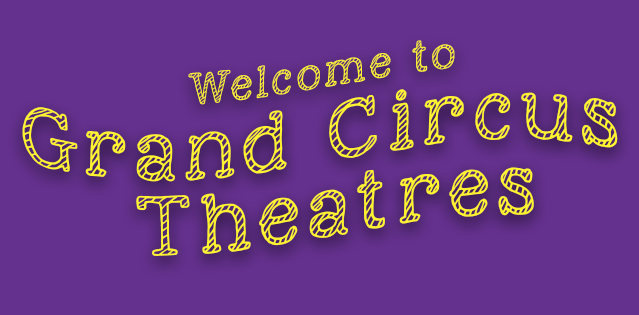
<style>
.page{position:relative;width:639px;height:315px;background:#65318f}
.page>*{position:absolute;margin:0}
.t1{font:62.5px "KGNexttoMeSketched";letter-spacing:0.1em;color:#fff02a}
.t2{font:33.3px "KGNexttoMeSketched";letter-spacing:0.1em;color:#fff02a}
</style>
<div class="page">
<p class="t1" style="left:22px;top:40px;width:596px;height:216px;text-align:center"><span class="t2">Welcome to</span> <br>Grand Circus <br>Theatres</p>
</div>
